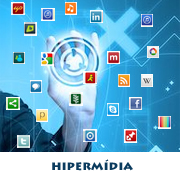
<style>
.page{position:relative;width:180px;height:180px}
.page>*{position:absolute;margin:0}
.t1{font:12.6px "LithosPro-Black";color:#0b3b5e}
</style>
<div class="page">
<p class="t1" style="left:52px;top:159px;width:81px;height:12px">hipermídia</p>
</div>
